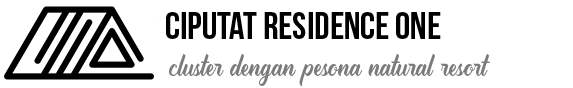
<style>
.page{position:relative;width:573px;height:88px;background:#ffffff}
.page>*{position:absolute;margin:0}
.t1{font:38.4px "BebasNeue";color:#000000}
.t2{font:25px "TradeMarkDemo-Regular";color:#7b7b7b}
</style>
<div class="page">
<p class="t1" style="left:166px;top:12px;width:275px;height:27px">Ciputat Residence One</p>
<p class="t2" style="left:169px;top:54px;width:321px;height:32px">cluster dengan pesona natural resort</p>
</div>
